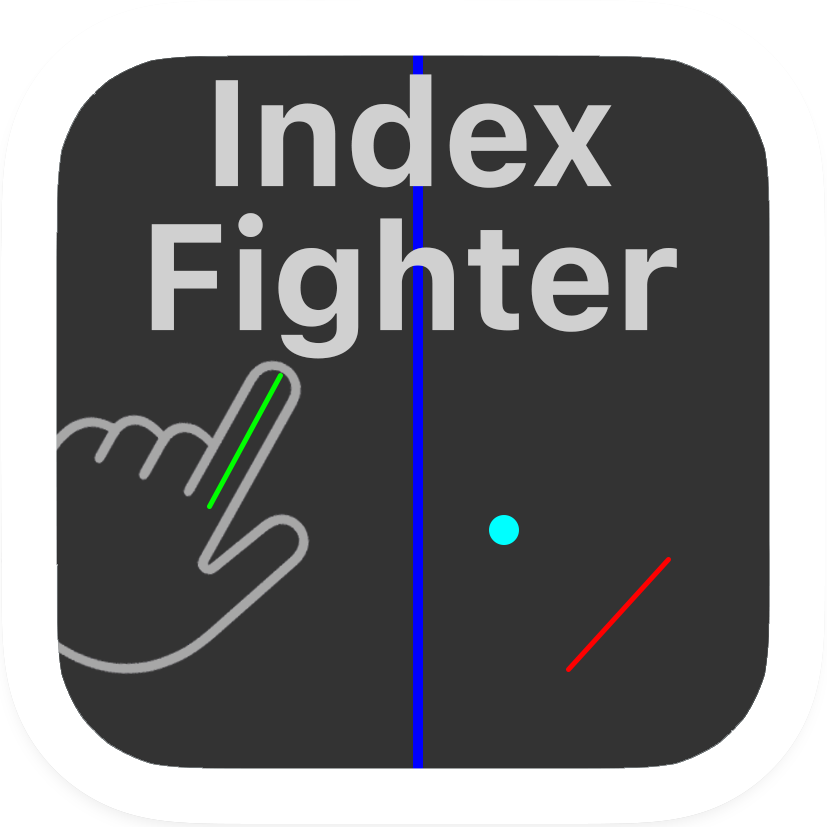
<style>
.page{position:relative;width:827px;height:827px;background:#333333}
.page>*{position:absolute;margin:0}
.t1{font:150px/144px "SFProText-Bold";color:#d0d0d0}
</style>
<div class="page">
<p class="t1" style="left:151px;top:74px;width:526px;height:285px;text-align:center">Index<br>Fighter</p>
</div>
